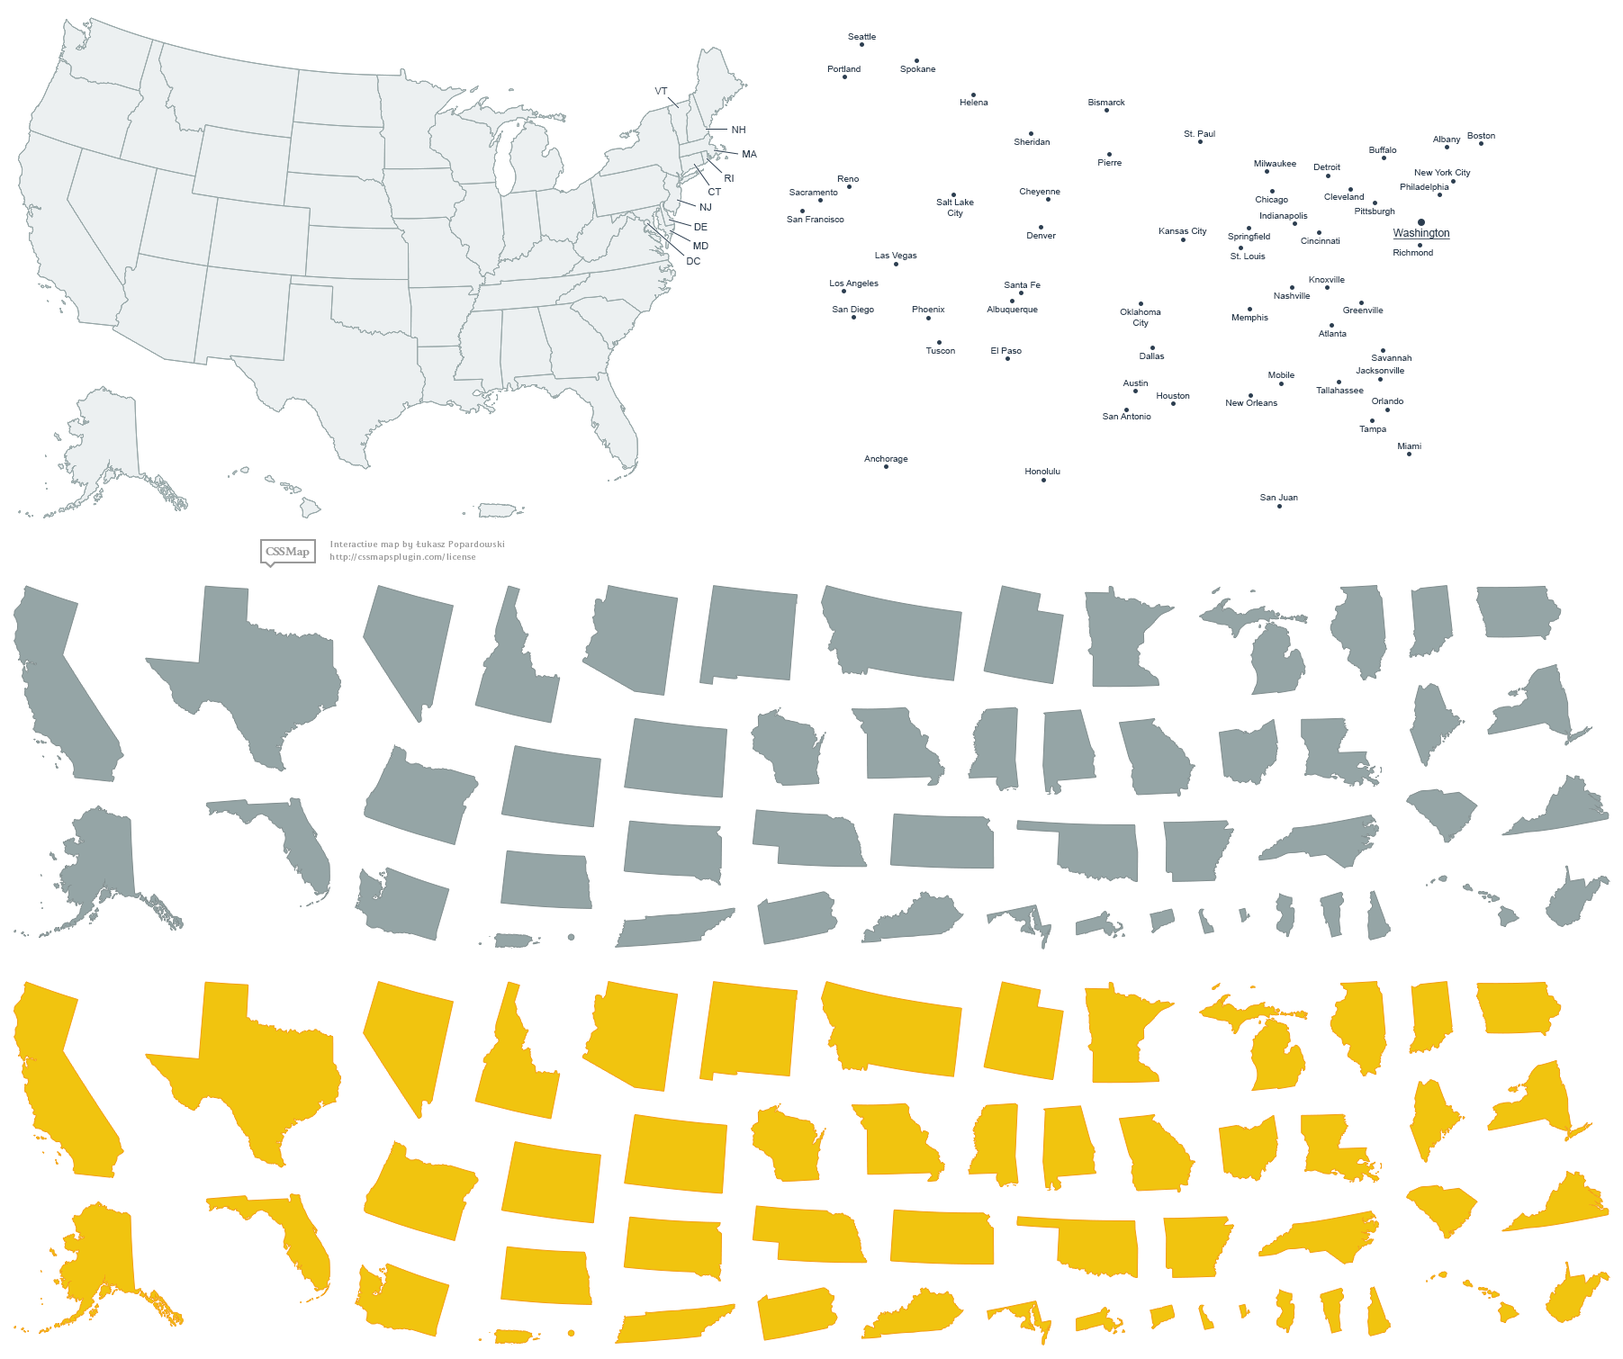
<style>
.page{position:relative;width:1623px;height:1359px;background:#ffffff}
.page>*{position:absolute;margin:0}
.t1{font:9px "ArialMT";color:#2c3e50}
.t2{font:9.9px "ArialMT";color:#2c3e50}
.t3{font:10.8px "ArialMT";color:#2c3e50;text-decoration:underline}
</style>
<div class="page">
<p class="t1" style="left:848px;top:33px;width:28px;height:7px">Seattle</p>
<p class="t1" style="left:827px;top:66px;width:33px;height:6px">Portland</p>
<p class="t1" style="left:900px;top:66px;width:36px;height:8px">Spokane</p>
<p class="t2" style="left:654px;top:87px;width:14px;height:7px">VT</p>
<p class="t1" style="left:960px;top:99px;width:28px;height:6px">Helena</p>
<p class="t1" style="left:1088px;top:99px;width:37px;height:6px">Bismarck</p>
<p class="t2" style="left:732px;top:126px;width:13px;height:7px">NH</p>
<p class="t1" style="left:1183px;top:130px;width:32px;height:7px">St. Paul</p>
<p class="t1" style="left:1432px;top:136px;width:29px;height:8px">Albany</p>
<p class="t1" style="left:1467px;top:132px;width:28px;height:7px">Boston</p>
<p class="t1" style="left:1013px;top:139px;width:36px;height:6px">Sheridan</p>
<p class="t1" style="left:1369px;top:147px;width:28px;height:6px">Buffalo</p>
<p class="t2" style="left:742px;top:150px;width:15px;height:7px">MA</p>
<p class="t1" style="left:1098px;top:159px;width:23px;height:7px">Pierre</p>
<p class="t1" style="left:1254px;top:160px;width:42px;height:6px">Milwaukee</p>
<p class="t1" style="left:1313px;top:164px;width:27px;height:6px">Detroit</p>
<p class="t1" style="left:1414px;top:169px;width:57px;height:8px">New York City</p>
<p class="t2" style="left:724px;top:175px;width:9px;height:7px">RI</p>
<p class="t1" style="left:837px;top:175px;width:22px;height:7px">Reno</p>
<p class="t1" style="left:1399px;top:184px;width:50px;height:8px">Philadelphia</p>
<p class="t2" style="left:708px;top:188px;width:14px;height:7px">CT</p>
<p class="t1" style="left:789px;top:189px;width:49px;height:6px">Sacramento</p>
<p class="t1" style="left:1019px;top:188px;width:41px;height:8px">Cheyenne</p>
<p class="t1" style="left:1255px;top:196px;width:33px;height:8px">Chicago</p>
<p class="t1" style="left:1324px;top:193px;width:39px;height:7px">Cleveland</p>
<p class="t2" style="left:700px;top:203px;width:11px;height:8px">NJ</p>
<p class="t1" style="left:936px;top:199px;width:38px;height:19px;text-align:center">Salt Lake<br>City</p>
<p class="t1" style="left:1354px;top:208px;width:41px;height:8px">Pittsburgh</p>
<p class="t1" style="left:787px;top:216px;width:57px;height:6px">San Francisco</p>
<p class="t1" style="left:1260px;top:212px;width:48px;height:8px">Indianapolis</p>
<p class="t2" style="left:694px;top:223px;width:13px;height:7px">DE</p>
<p class="t1" style="left:1027px;top:232px;width:30px;height:6px">Denver</p>
<p class="t1" style="left:1158px;top:228px;width:49px;height:8px">Kansas City</p>
<p class="t1" style="left:1228px;top:233px;width:42px;height:8px">Springfield</p>
<p class="t3" style="left:1392px;top:229px;width:58px;height:10px">Washington</p>
<p class="t2" style="left:693px;top:242px;width:15px;height:7px">MD</p>
<p class="t1" style="left:1300px;top:238px;width:40px;height:6px">Cincinnati</p>
<p class="t2" style="left:687px;top:257px;width:13px;height:8px">DC</p>
<p class="t1" style="left:875px;top:252px;width:42px;height:8px">Las Vegas</p>
<p class="t1" style="left:1230px;top:253px;width:35px;height:6px">St. Louis</p>
<p class="t1" style="left:1393px;top:249px;width:40px;height:7px">Richmond</p>
<p class="t1" style="left:830px;top:280px;width:48px;height:8px">Los Angeles</p>
<p class="t1" style="left:1003px;top:282px;width:37px;height:6px">Santa Fe</p>
<p class="t1" style="left:1309px;top:276px;width:36px;height:7px">Knoxville</p>
<p class="t1" style="left:1273px;top:292px;width:37px;height:7px">Nashville</p>
<p class="t1" style="left:832px;top:306px;width:42px;height:8px">San Diego</p>
<p class="t1" style="left:912px;top:306px;width:33px;height:6px">Phoenix</p>
<p class="t1" style="left:986px;top:306px;width:52px;height:8px">Albuquerque</p>
<p class="t1" style="left:1120px;top:309px;width:41px;height:19px;text-align:center">Oklahoma<br>City</p>
<p class="t1" style="left:1231px;top:314px;width:37px;height:8px">Memphis</p>
<p class="t1" style="left:1343px;top:307px;width:40px;height:6px">Greenville</p>
<p class="t1" style="left:1318px;top:330px;width:28px;height:7px">Atlanta</p>
<p class="t1" style="left:925px;top:347px;width:30px;height:7px">Tuscon</p>
<p class="t1" style="left:991px;top:347px;width:30px;height:7px">El Paso</p>
<p class="t1" style="left:1139px;top:353px;width:26px;height:6px">Dallas</p>
<p class="t1" style="left:1371px;top:355px;width:40px;height:6px">Savannah</p>
<p class="t1" style="left:1268px;top:372px;width:26px;height:6px">Mobile</p>
<p class="t1" style="left:1355px;top:367px;width:49px;height:6px">Jacksonville</p>
<p class="t1" style="left:1122px;top:380px;width:25px;height:6px">Austin</p>
<p class="t1" style="left:1316px;top:387px;width:47px;height:6px">Tallahassee</p>
<p class="t1" style="left:1156px;top:392px;width:34px;height:7px">Houston</p>
<p class="t1" style="left:1226px;top:400px;width:51px;height:6px">New Orleans</p>
<p class="t1" style="left:1372px;top:398px;width:31px;height:6px">Orlando</p>
<p class="t1" style="left:1102px;top:413px;width:49px;height:6px">San Antonio</p>
<p class="t1" style="left:1359px;top:426px;width:27px;height:8px">Tampa</p>
<p class="t1" style="left:1398px;top:443px;width:23px;height:6px">Miami</p>
<p class="t1" style="left:864px;top:455px;width:44px;height:8px">Anchorage</p>
<p class="t1" style="left:1025px;top:468px;width:35px;height:6px">Honolulu</p>
<p class="t1" style="left:1260px;top:494px;width:38px;height:6px">San Juan</p>
</div>
